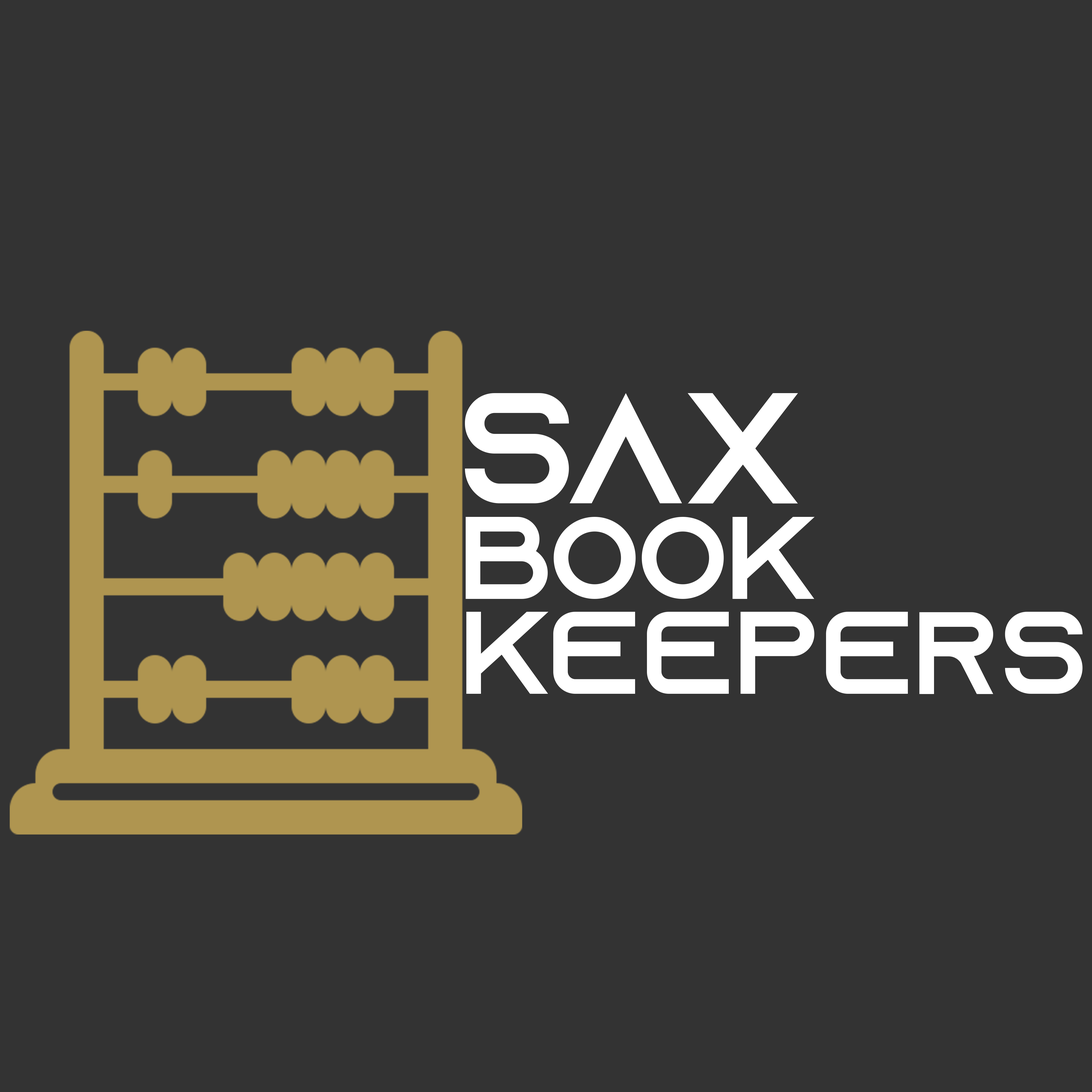
<style>
.page{position:relative;width:1092px;height:1092px;background:#333333}
.page>*{position:absolute;margin:0}
.t1{font:157.3px "AzonixRegular";color:#ffffff}
.t2{font:117px "AzonixRegular";color:#ffffff}
</style>
<div class="page">
<p class="t1" style="left:465px;top:393px;width:333px;height:111px">sax</p>
<p class="t2" style="left:466px;top:517px;width:349px;height:82px">book</p>
<p class="t2" style="left:466px;top:612px;width:617px;height:82px">keepers</p>
</div>
